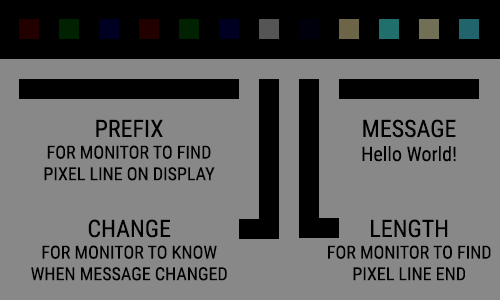
<style>
.page{position:relative;width:500px;height:300px;background:#888888}
.page>*{position:absolute;margin:0}
.t1{font:18px "RobotoCondensed-Regular";color:#000000}
.t2{font:24px "RobotoCondensed-Regular";color:#000000}
.t3{font:20px "RobotoCondensed-Regular";color:#000000}
</style>
<div class="page">
<p class="t1" style="left:44px;top:119px;width:171px;height:62px;text-align:center"><span class="t2">PREFIX<br></span>FOR MONITOR TO FIND<br>PIXEL LINE ON DISPLAY</p>
<p class="t3" style="left:362px;top:119px;width:94px;height:43px;text-align:center"><span class="t2">MESSAGE<br></span>Hello World!</p>
<p class="t1" style="left:31px;top:219px;width:196px;height:62px;text-align:center"><span class="t2">CHANGE<br></span>FOR MONITOR TO KNOW<br>WHEN MESSAGE CHANGED</p>
<p class="t1" style="left:328px;top:219px;width:163px;height:62px;text-align:center"><span class="t2">LENGTH<br></span>FOR MONITOR TO FIND<br>PIXEL LINE END</p>
</div>
